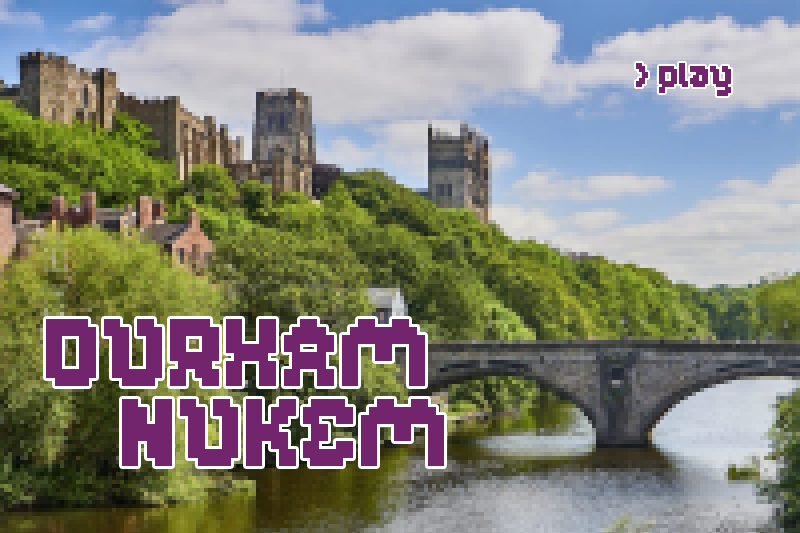
<style>
.page{position:relative;width:800px;height:533px}
.page>*{position:absolute;margin:0}
.t1{font:36px "GLITCH";color:#72246c}
.t2{font:102px/80px "GLITCH";color:#72246c}
</style>
<div class="page">
<p class="t1" style="left:636px;top:63px;width:95px;height:33px">&gt; play</p>
<p class="t2" style="left:46px;top:319px;width:398px;height:147px">DURHAM<br>   NUKEM</p>
</div>
